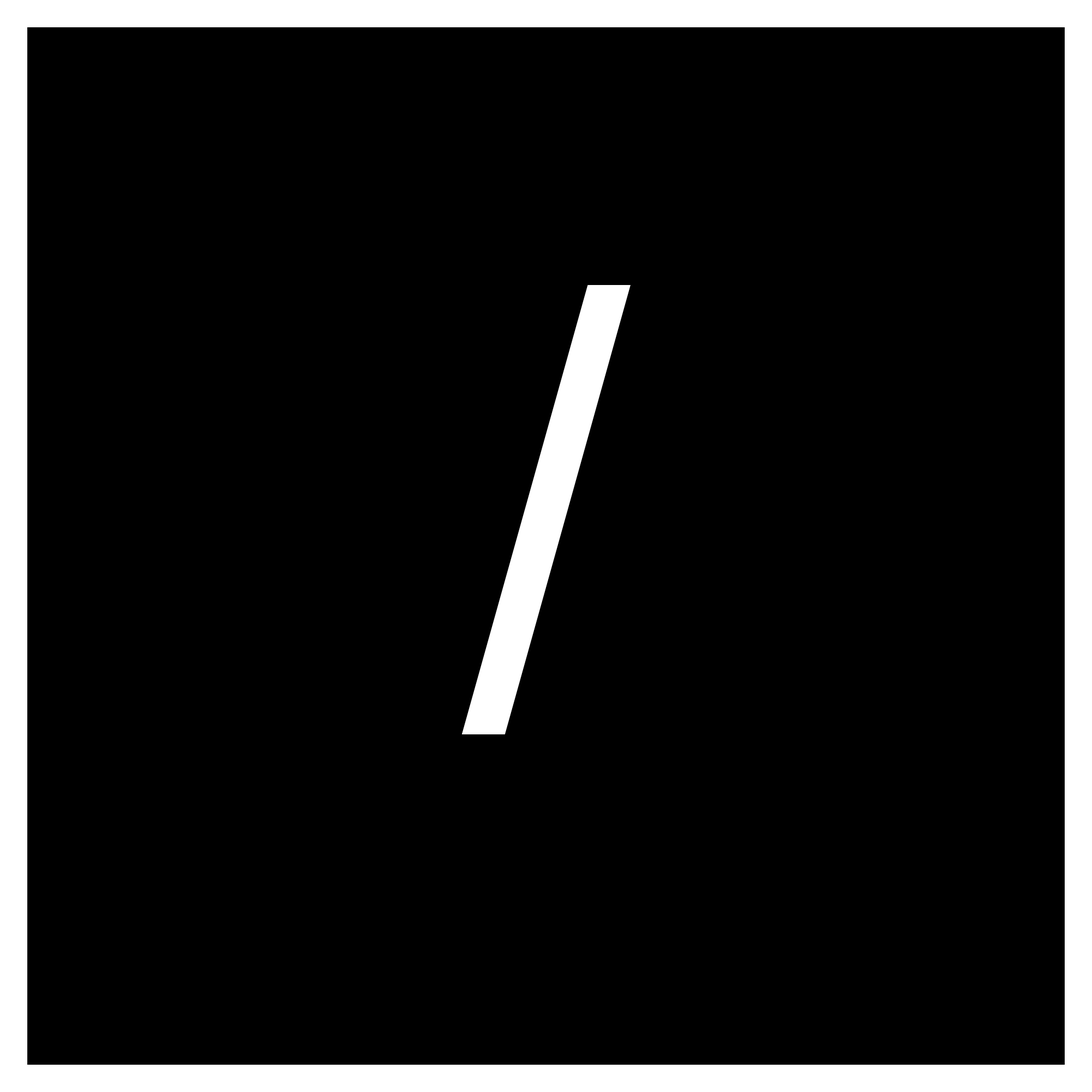
<style>
.page{position:relative;width:1092px;height:1092px;background:#000000}
.page>*{position:absolute;margin:0}
.t1{font:606.7px "ArialMT";color:#ffffff}
</style>
<div class="page">
<p class="t1" style="left:462px;top:285px;width:169px;height:449px">/</p>
</div>
